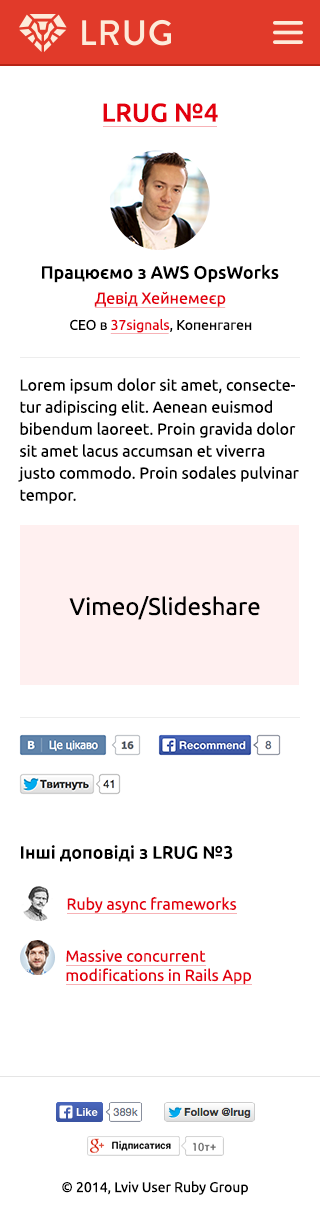
<style>
.page{position:relative;width:320px;height:1220px;background:#ffffff}
.page>*{position:absolute;margin:0}
.t1{font:26px "Ubuntu-Medium";color:#e3000e}
.t2{font:18px "Ubuntu-Medium";color:#000000}
.t3{font:16px "Ubuntu";color:#e3000e}
.t4{font:13.9px "Ubuntu";color:#000000}
.t5{font:13.9px "Ubuntu";color:#e3000e}
.t6{font:16px/22px "Ubuntu";color:#000000}
.t7{font:24px "Ubuntu";color:#000000}
.t8{font:14px "Ubuntu";color:#000000}
</style>
<div class="page">
<p class="t1" style="left:103px;top:103px;width:115px;height:20px">LRUG №4</p>
<p class="t2" style="left:42px;top:264px;width:237px;height:19px">Працюємо з AWS OpsWorks</p>
<p class="t3" style="left:94px;top:291px;width:132px;height:16px">Девід Хейнемеєр</p>
<p class="t4" style="left:70px;top:318px;width:182px;height:15px">CEO в <span class="t5">37signals</span>, Копенгаген</p>
<p class="t6" style="left:18px;top:378px;width:281px;height:126px">Lorem ipsum dolor sit amet, consectetur adipiscing elit. Aenean euismod bibendum laoreet. Proin gravida dolor sit amet lacus accumsan et viverra justo commodo. Proin sodales pulvinar tempor.</p>
<p class="t7" style="left:69px;top:596px;width:191px;height:24px">Vimeo/Slideshare</p>
<p class="t2" style="left:21px;top:845px;width:212px;height:17px">Інші доповіді з LRUG №3</p>
<p class="t3" style="left:67px;top:897px;width:170px;height:16px">Ruby async frameworks</p>
<p class="t3" style="left:66px;top:949px;width:185px;height:35px">Massive concurrent <br>modifications in Rails App</p>
<p class="t8" style="left:62px;top:1181px;width:186px;height:14px">© 2014, Lviv User Ruby Group</p>
</div>
